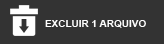
<style>
.page{position:relative;width:164px;height:44px;background:#333333}
.page>*{position:absolute;margin:0}
.t1{font:10px "Arial-BoldMT";color:#ffffff}
</style>
<div class="page">
<p class="t1" style="left:45px;top:20px;width:101px;height:8px">EXCLUIR 1 ARQUIVO</p>
</div>
